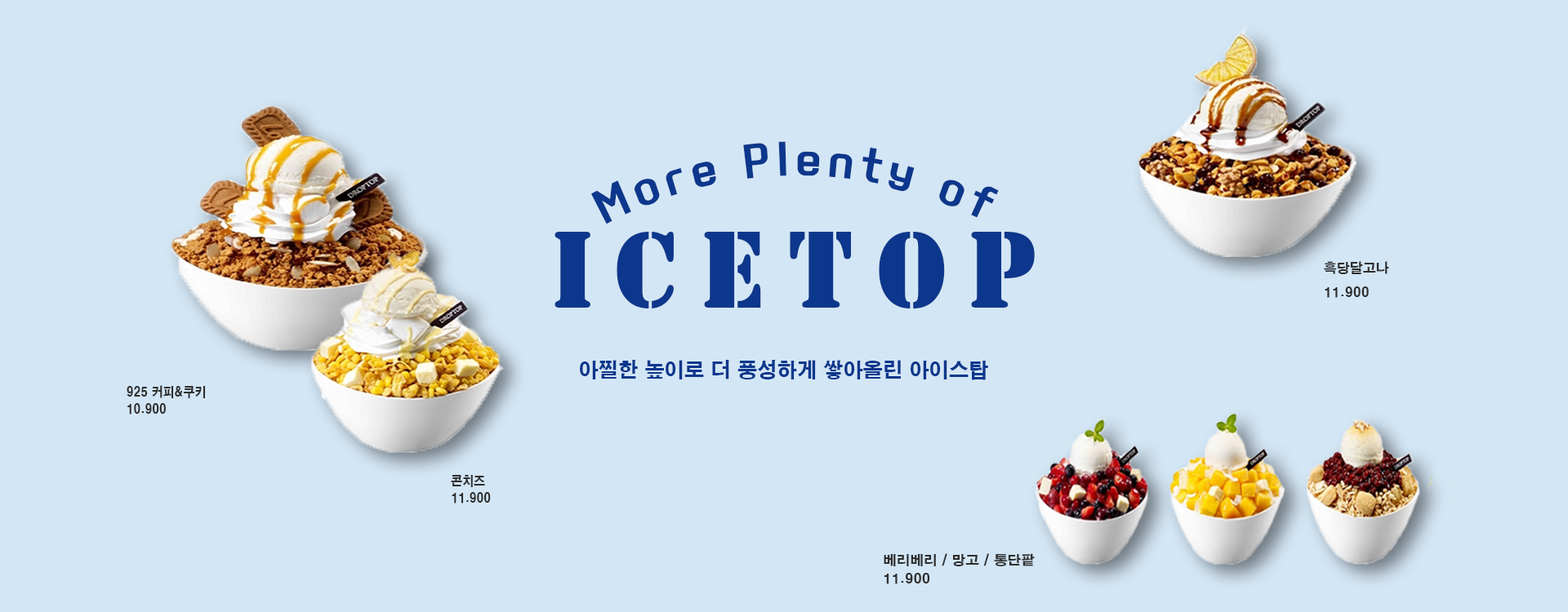
<style>
.page{position:relative;width:1568px;height:612px;background:#d3e6f5}
.page>*{position:absolute;margin:0}
.t1{font:36.8px "KoreanYNMYT-B";letter-spacing:0.2em;color:#0d378c}
.t2{font:106.2px "Stencil-BT";letter-spacing:0.2em;color:#0d378c}
.t3{font:13.1px/24.5px "HYgtrE";color:#2e2e2e}
.t4{font:20.4px "HYgtrE";color:#0d378c}
.t5{font:13.1px/17.1px "HYgtrE";color:#2e2e2e;scale:0.87 1}
.t6{font:13.1px/18.7px "HYgtrE";color:#2e2e2e;scale:1.04 1}
</style>
<div class="page">
<p class="t1" style="left:590px;top:141px;width:409px;height:84px">More Plenty of</p>
<p class="t2" style="left:555px;top:232px;width:480px;height:77px">ICETOP</p>
<p class="t3" style="left:1324px;top:261px;width:65px;height:37px">흑당달고나<br>11.900</p>
<p class="t4" style="left:580px;top:360px;width:408px;height:21px">아찔한 높이로 더 풍성하게 쌓아올린 아이스탑</p>
<p class="t5" style="left:127px;top:385px;width:79px;height:30px">925 커피&amp;쿠키<br>10.900</p>
<p class="t5" style="left:451px;top:475px;width:40px;height:29px">콘치즈<br>11.900</p>
<p class="t6" style="left:884px;top:554px;width:151px;height:31px">베리베리 / 망고 / 통단팥<br>11.900</p>
</div>
